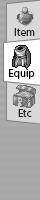
<style>
.page{position:relative;width:40px;height:200px;background:#a6a6a6}
.page>*{position:absolute;margin:0}
.t1{font:11px "MyriadPro-Regular";color:#262626}
.t2{font:11px "MyriadPro-Regular";color:#000000}
</style>
<div class="page">
<p class="t1" style="left:14px;top:28px;width:21px;height:8px">Item</p>
<p class="t2" style="left:9px;top:69px;width:26px;height:10px">Equip</p>
<p class="t1" style="left:18px;top:109px;width:14px;height:8px">Etc</p>
</div>
